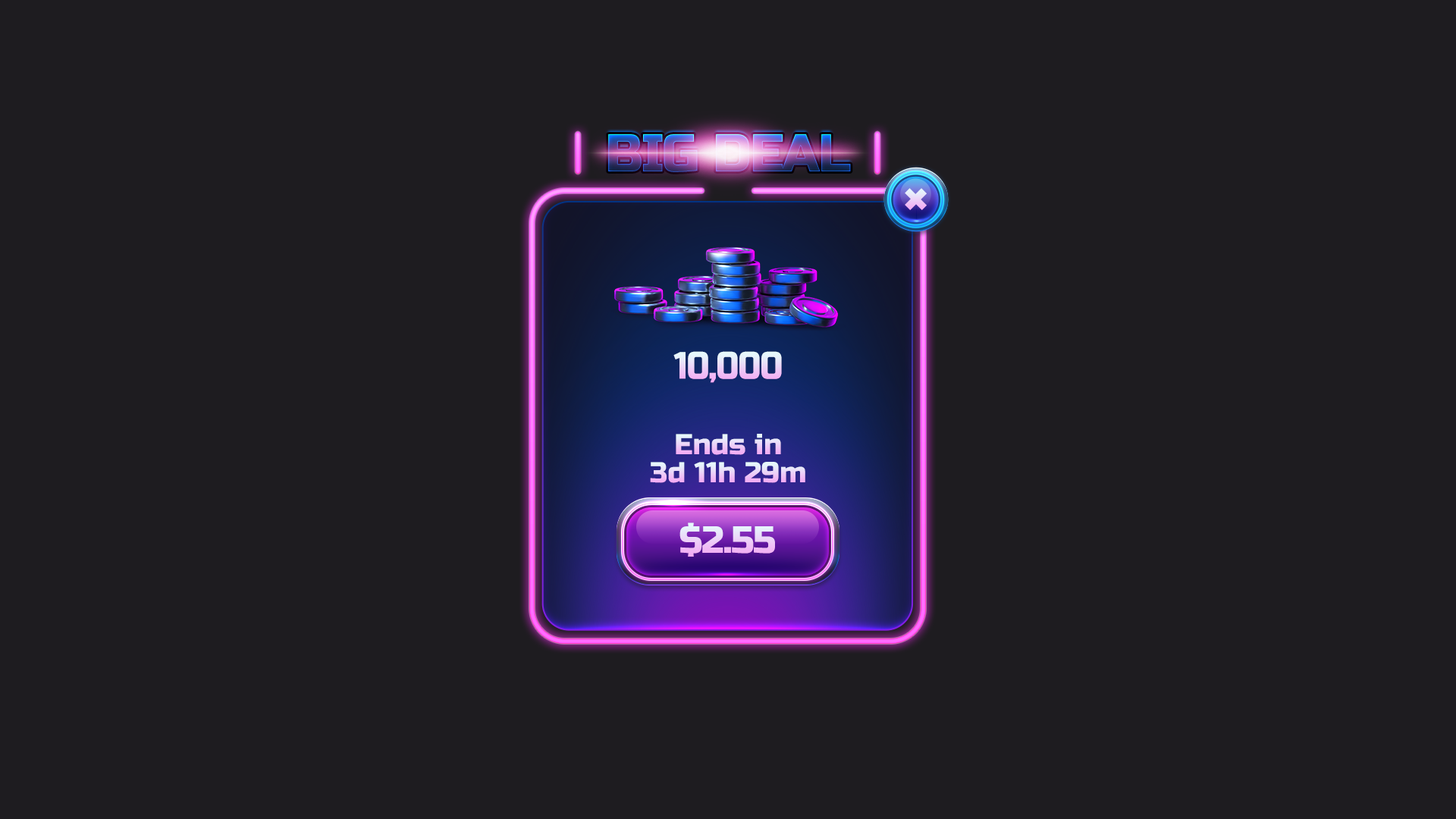
<style>
.page{position:relative;width:1456px;height:819px;background:#1e1c20}
.page>*{position:absolute;margin:0}
.t1{font:37.9px "RussoOne-Regular";letter-spacing:-0.025em;scale:0.9 1}
.t2{font:28.8px "RussoOne-Regular"}
.t3{font:37.9px "RussoOne-Regular";letter-spacing:-0.025em}
</style>
<div class="page">
<p class="t1" style="left:673px;top:351px;width:109px;height:32px">10,000</p>
<p class="t2" style="left:676px;top:434px;width:105px;height:21px">Ends in</p>
<p class="t2" style="left:650px;top:462px;width:155px;height:21px">3d 11h 29m</p>
<p class="t3" style="left:679px;top:522px;width:96px;height:35px">$2.55</p>
</div>
